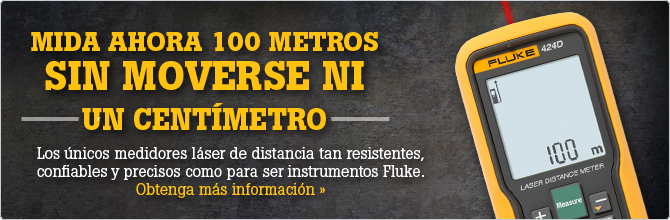
<style>
.page{position:relative;width:670px;height:220px}
.page>*{position:absolute;margin:0}
.t1{font:26.8px/44.8px "BotonPro-Bold";color:#ffc20e;text-transform:uppercase}
.t2{font:39.5px/39.5px "BotonPro-Bold";color:#ffc20e;text-transform:uppercase}
.t3{font:30px/0px "BotonPro-Bold";color:#ffc20e;text-transform:uppercase}
.t4{font:16px/18px "BotonPro-Regular";color:#ffffff}
.t5{font:16px/18px "BotonPro-Regular";color:#ffc20e}
</style>
<div class="page">
<p class="t1" style="left:31px;top:32px;width:347px;height:98px;text-align:center">MIDA AHORA 100 METROS<br><span class="t2">SIN MOVERSE NI<br><br></span><span class="t3">UN CENTÍMETRO</span></p>
<p class="t4" style="left:37px;top:147px;width:387px;height:51px;text-align:center">Los únicos medidores láser de distancia tan resistentes,<br>confiables y precisos como para ser instrumentos Fluke. <span class="t5">Obtenga más información »</span></p>
</div>
